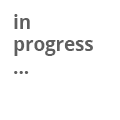
<style>
.page{position:relative;width:120px;height:120px;background:#ffffff}
.page>*{position:absolute;margin:0}
.t1{font:18.7px "OpenSans-Bold";color:#5f5f5f}
</style>
<div class="page">
<p class="t1" style="left:14px;top:14px;width:79px;height:60px">in<br>progress<br>...</p>
</div>
